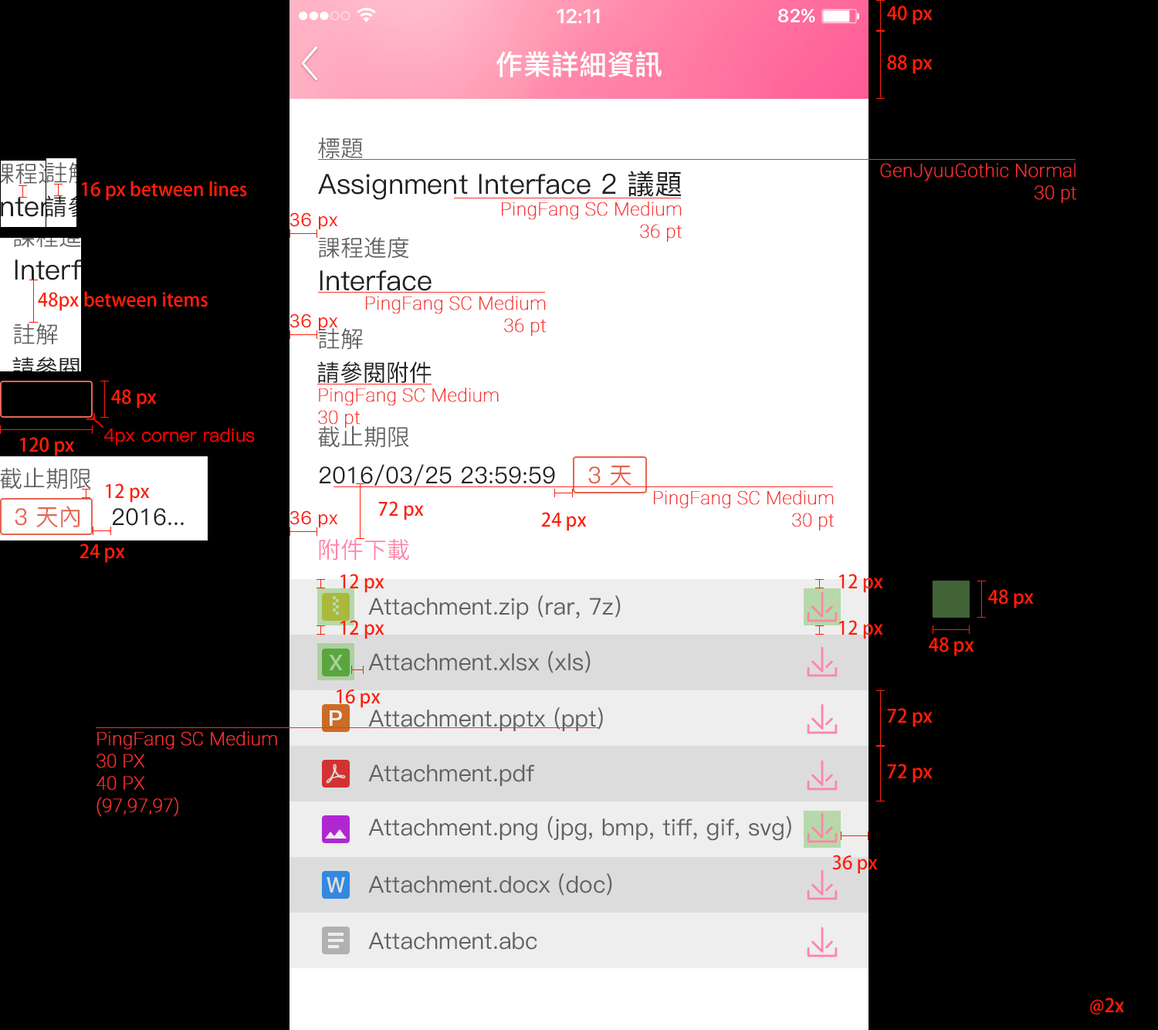
<style>
.page{position:relative;width:1158px;height:1030px;background:#000000}
.page>*{position:absolute;margin:0}
.t1{font:18.5px "AdobeFanHeitiStd-Bold";color:#ff1e07}
.t2{font:20.1px "SFUIDisplay-Semibold";color:#ffffff}
.t3{font:18.5px "SFUIDisplay-Semibold";letter-spacing:0.025em;color:#ffffff}
.t4{font:27.8px "PingFang-SC-Bold";color:#ffffff}
.t5{font:23.2px "GenJyuuGothic-Normal";color:#616161}
.t6{font:27.8px "PingFang-SC-Medium";color:#212121}
.t7{font:18.5px "Roboto-Thin";color:#f83030;font-weight:bold}
.t8{font:18.5px "SFUIText-Regular";color:#ff1e07}
.t9{font:23.2px "PingFang-SC-Medium";color:#212121}
.t10{font:18.5px "PingFang-SC-Medium";color:#ff0000}
.t11{font:23.2px "PingFang-SC-Medium";color:#e36550}
.t12{font:23.2px "GenJyuuGothic-Normal";color:#ff83a8}
.t13{font:23.2px "PingFang-SC-Medium";color:#616161}
</style>
<div class="page">
<p class="t1" style="left:887px;top:5px;width:46px;height:20px">40 px</p>
<p class="t2" style="left:557px;top:8px;width:43px;height:16px">12:11</p>
<p class="t3" style="left:778px;top:8px;width:37px;height:14px">82%</p>
<p class="t4" style="left:496px;top:51px;width:166px;height:26px">作業詳細資訊</p>
<p class="t1" style="left:887px;top:55px;width:46px;height:19px">88 px</p>
<p class="t5" style="left:318px;top:137px;width:45px;height:22px">標題</p>
<p class="t6" style="left:318px;top:171px;width:364px;height:29px">Assignment Interface 2 議題</p>
<p class="t7" style="left:880px;top:163px;width:197px;height:40px;text-align:right">GenJyuuGothic Normal<br>30 pt</p>
<p class="t1" style="left:82px;top:181px;width:165px;height:20px">16 px between lines</p>
<p class="t7" style="left:502px;top:201px;width:180px;height:41px;text-align:right">PingFang SC Medium<br>36 pt</p>
<p class="t8" style="left:289px;top:212px;width:49px;height:18px">36 px</p>
<p class="t5" style="left:318px;top:237px;width:91px;height:22px">課程進度</p>
<p class="t6" style="left:320px;top:270px;width:112px;height:21px">Interface</p>
<p class="t1" style="left:38px;top:291px;width:170px;height:20px">48px between items</p>
<p class="t7" style="left:366px;top:296px;width:181px;height:40px;text-align:right">PingFang SC Medium<br>36 pt</p>
<p class="t8" style="left:289px;top:313px;width:49px;height:18px">36 px</p>
<p class="t5" style="left:318px;top:328px;width:45px;height:22px">註解</p>
<p class="t9" style="left:317px;top:361px;width:115px;height:22px">請參閱附件</p>
<p class="t1" style="left:111px;top:389px;width:46px;height:19px">48 px</p>
<p class="t7" style="left:318px;top:388px;width:181px;height:40px">PingFang SC Medium<br>30 pt</p>
<p class="t5" style="left:318px;top:425px;width:91px;height:23px">截止期限</p>
<p class="t1" style="left:20px;top:437px;width:54px;height:19px">120 px</p>
<p class="t10" style="left:104px;top:428px;width:151px;height:17px">4px corner radius</p>
<p class="t5" style="left:0px;top:467px;width:91px;height:22px">截止期限</p>
<p class="t9" style="left:319px;top:464px;width:236px;height:22px">2016/03/25 23:59:59</p>
<p class="t11" style="left:588px;top:465px;width:43px;height:21px">3 天</p>
<p class="t1" style="left:106px;top:483px;width:44px;height:20px">12 px</p>
<p class="t7" style="left:654px;top:490px;width:180px;height:40px;text-align:right">PingFang SC Medium<br>30 pt</p>
<p class="t11" style="left:15px;top:506px;width:65px;height:21px">3 天內</p>
<p class="t9" style="left:112px;top:508px;width:72px;height:18px">2016...</p>
<p class="t1" style="left:378px;top:501px;width:46px;height:19px">72 px</p>
<p class="t8" style="left:289px;top:510px;width:49px;height:18px">36 px</p>
<p class="t1" style="left:541px;top:512px;width:46px;height:19px">24 px</p>
<p class="t1" style="left:80px;top:543px;width:45px;height:20px">24 px</p>
<p class="t12" style="left:319px;top:539px;width:90px;height:21px">附件下載</p>
<p class="t1" style="left:340px;top:574px;width:44px;height:19px">12 px</p>
<p class="t1" style="left:839px;top:574px;width:44px;height:19px">12 px</p>
<p class="t1" style="left:988px;top:589px;width:46px;height:19px">48 px</p>
<p class="t13" style="left:368px;top:595px;width:253px;height:24px">Attachment.zip (rar, 7z)</p>
<p class="t1" style="left:340px;top:620px;width:44px;height:19px">12 px</p>
<p class="t1" style="left:839px;top:620px;width:44px;height:19px">12 px</p>
<p class="t1" style="left:929px;top:637px;width:45px;height:19px">48 px</p>
<p class="t13" style="left:368px;top:651px;width:223px;height:22px">Attachment.xlsx (xls)</p>
<p class="t1" style="left:337px;top:689px;width:44px;height:19px">16 px</p>
<p class="t13" style="left:368px;top:707px;width:235px;height:24px">Attachment.pptx (ppt)</p>
<p class="t1" style="left:887px;top:708px;width:46px;height:19px">72 px</p>
<p class="t7" style="left:96px;top:731px;width:181px;height:86px">PingFang SC Medium<br>30 PX<br>40 PX<br>(97,97,97)</p>
<p class="t13" style="left:368px;top:764px;width:166px;height:22px">Attachment.pdf</p>
<p class="t1" style="left:887px;top:763px;width:46px;height:20px">72 px</p>
<p class="t13" style="left:368px;top:816px;width:423px;height:25px">Attachment.png (jpg, bmp, tiff, gif, svg)</p>
<p class="t1" style="left:832px;top:855px;width:46px;height:19px">36 px</p>
<p class="t13" style="left:368px;top:873px;width:244px;height:22px">Attachment.docx (doc)</p>
<p class="t13" style="left:368px;top:932px;width:169px;height:18px">Attachment.abc</p>
<p class="t1" style="left:1090px;top:997px;width:34px;height:17px">@2x</p>
</div>
